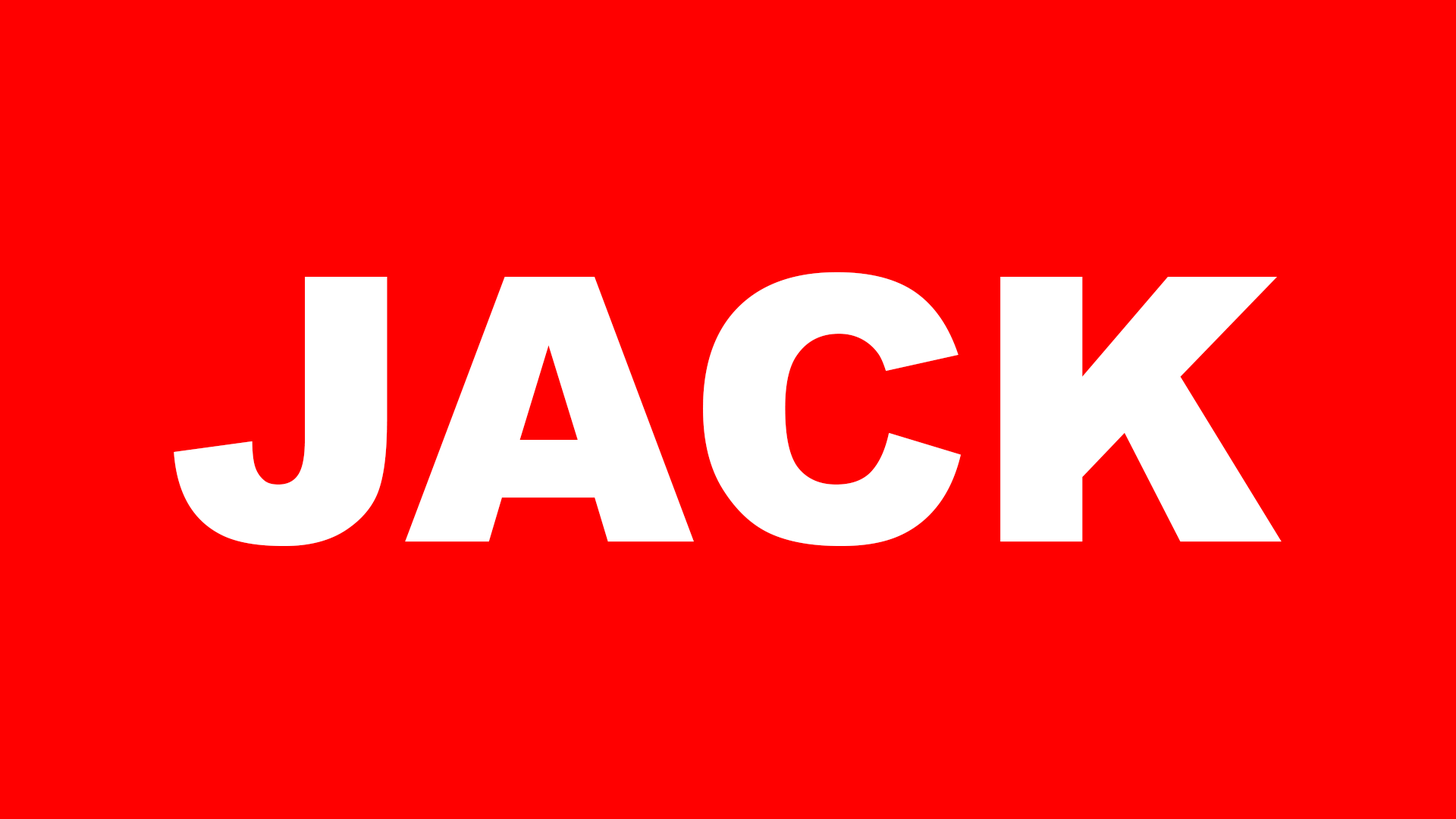
<style>
.page{position:relative;width:1456px;height:819px;background:#ff0000}
.page>*{position:absolute;margin:0}
.t1{font:369.7px "Arial-Black";color:#ffffff}
</style>
<div class="page">
<p class="t1" style="left:174px;top:272px;width:1108px;height:274px">JACK</p>
</div>
